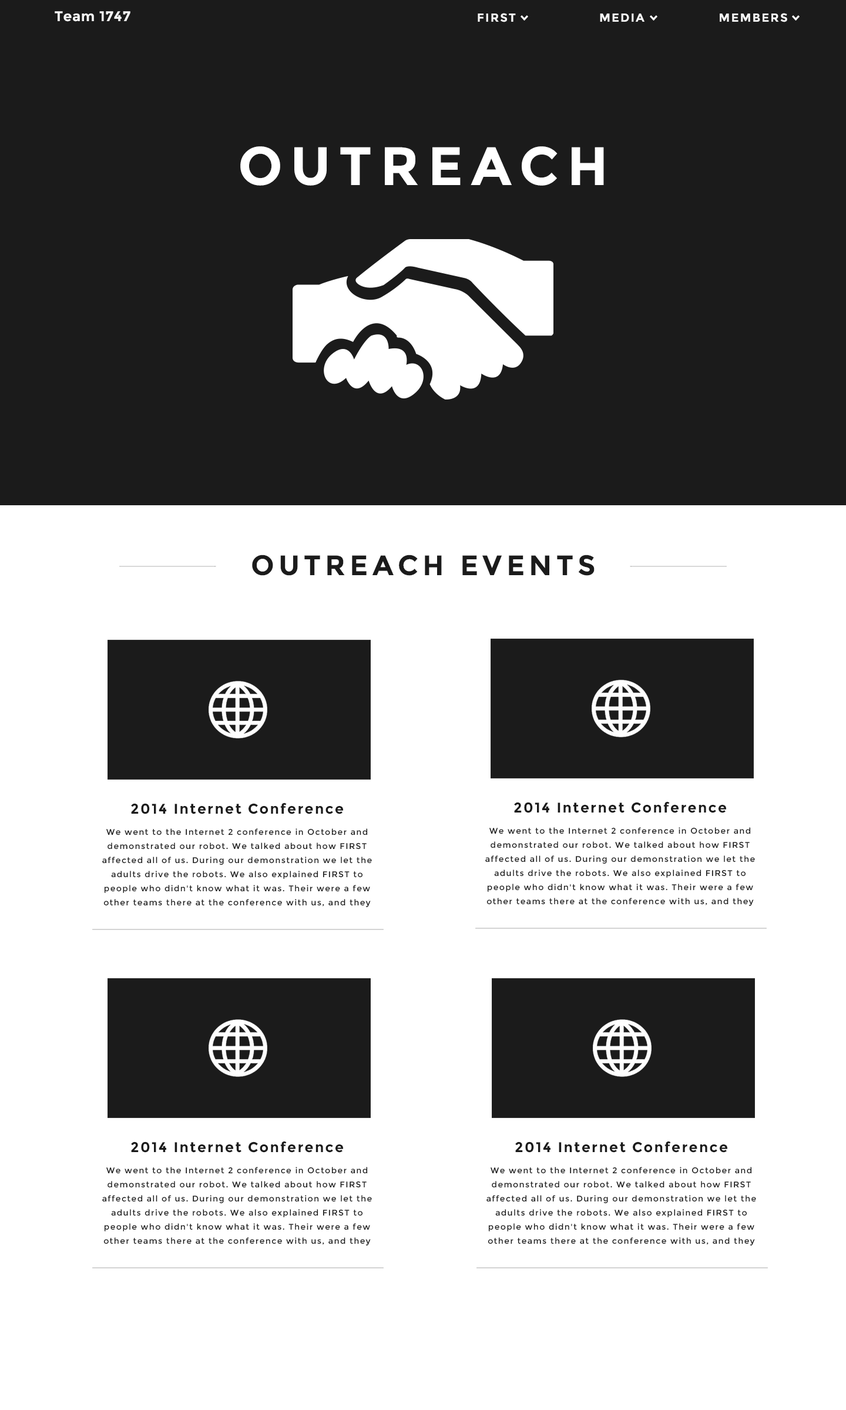
<style>
.page{position:relative;width:846px;height:1410px;background:#ffffff}
.page>*{position:absolute;margin:0}
.t1{font:14.1px "Montserrat-Bold";letter-spacing:0.025em;color:#f6f6f6}
.t2{font:11.7px "Montserrat-Bold";letter-spacing:0.1em;color:#f6f6f6}
.t3{font:54px "Montserrat-Bold";letter-spacing:0.15em;color:#ffffff}
.t4{font:28.2px "Montserrat-Bold";letter-spacing:0.15em;color:#1b1b1b}
.t5{font:8.2px/14.1px "Montserrat-Regular";letter-spacing:0.1em;color:#1b1b1b}
.t6{font:14.1px/17.6px "Montserrat-Bold";letter-spacing:0.1em;color:#1b1b1b}
.t7{font:14.1px/21.1px "Montserrat-Bold";letter-spacing:0.1em;color:#1b1b1b}
.t8{font:8.2px/21.1px "Montserrat-Regular";letter-spacing:0.1em;color:#1b1b1b}
</style>
<div class="page">
<p class="t1" style="left:55px;top:11px;width:75px;height:11px">Team 1747</p>
<p class="t2" style="left:478px;top:13px;width:38px;height:9px">FIRST</p>
<p class="t2" style="left:600px;top:14px;width:44px;height:8px">MEDIA</p>
<p class="t2" style="left:720px;top:13px;width:67px;height:9px">MEMBERS</p>
<p class="t3" style="left:240px;top:146px;width:364px;height:40px">OUTREACH</p>
<p class="t4" style="left:252px;top:555px;width:342px;height:21px">OUTREACH EVENTS</p>
<p class="t5" style="left:102px;top:802px;width:270px;height:106px;text-align:center"><span class="t6">2014 Internet </span><span class="t7">Conference<br></span><span class="t8">We </span>went to the Internet 2 conference in October and demonstrated our robot. We talked about how FIRST affected all of us. During our demonstration we let the adults drive the robots. We also explained FIRST to people who didn't know what it was. Their were a few other teams there at the conference with us, and they also demonstrated their robots as well. All together, we were there for about five hours. It was a great experience being there and being able to spread the word of FIRST to all of the people who showed up.</p>
<p class="t5" style="left:485px;top:801px;width:270px;height:105px;text-align:center"><span class="t6">2014 Internet </span><span class="t7">Conference<br></span><span class="t8">We </span>went to the Internet 2 conference in October and demonstrated our robot. We talked about how FIRST affected all of us. During our demonstration we let the adults drive the robots. We also explained FIRST to people who didn't know what it was. Their were a few other teams there at the conference with us, and they also demonstrated their robots as well. All together, we were there for about five hours. It was a great experience being there and being able to spread the word of FIRST to all of the people who showed up.</p>
<p class="t5" style="left:102px;top:1141px;width:270px;height:105px;text-align:center"><span class="t6">2014 Internet </span><span class="t7">Conference<br></span><span class="t8">We </span>went to the Internet 2 conference in October and demonstrated our robot. We talked about how FIRST affected all of us. During our demonstration we let the adults drive the robots. We also explained FIRST to people who didn't know what it was. Their were a few other teams there at the conference with us, and they also demonstrated their robots as well. All together, we were there for about five hours. It was a great experience being there and being able to spread the word of FIRST to all of the people who showed up.</p>
<p class="t5" style="left:486px;top:1141px;width:270px;height:105px;text-align:center"><span class="t6">2014 Internet </span><span class="t7">Conference<br></span><span class="t8">We </span>went to the Internet 2 conference in October and demonstrated our robot. We talked about how FIRST affected all of us. During our demonstration we let the adults drive the robots. We also explained FIRST to people who didn't know what it was. Their were a few other teams there at the conference with us, and they also demonstrated their robots as well. All together, we were there for about five hours. It was a great experience being there and being able to spread the word of FIRST to all of the people who showed up.</p>
</div>
